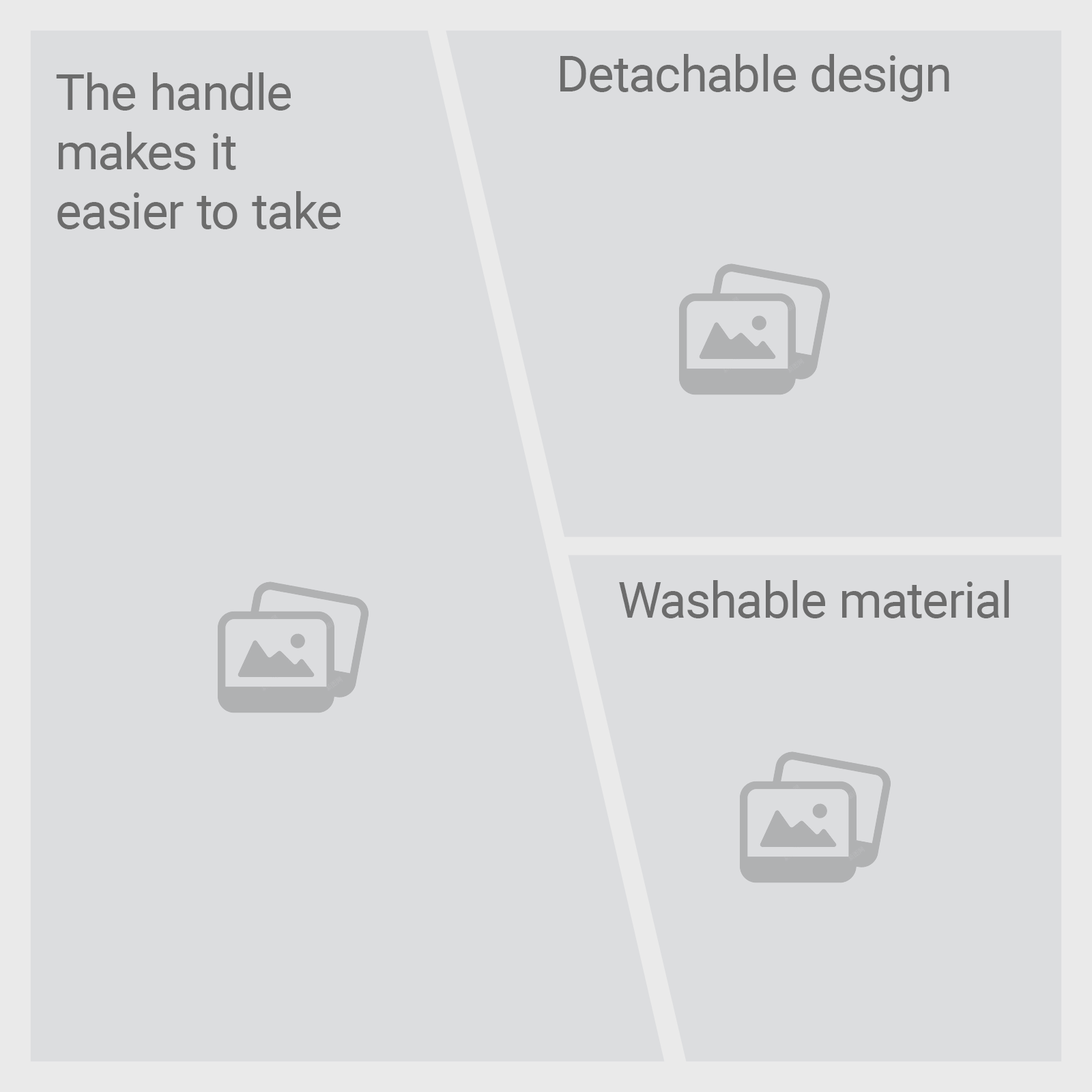
<style>
.page{position:relative;width:1092px;height:1092px;background:#dcdddf}
.page>*{position:absolute;margin:0}
.t1{font:49.5px "Roboto-Regular";color:#6c6c6c}
</style>
<div class="page">
<p class="t1" style="left:560px;top:54px;width:389px;height:48px">Detachable design</p>
<p class="t1" style="left:56px;top:72px;width:285px;height:157px">The handle <br>makes it <br>easier to take</p>
<p class="t1" style="left:619px;top:580px;width:390px;height:38px">Washable material</p>
</div>
